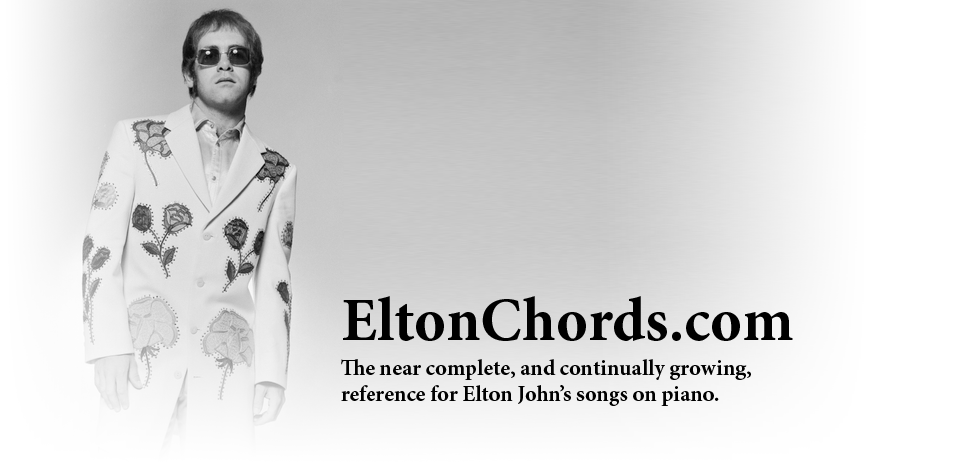
<style>
.page{position:relative;width:970px;height:475px}
.page>*{position:absolute;margin:0}
.t1{font:61.2px "MinionPro-Bold";color:#000000}
.t2{font:22.1px "MinionPro-Bold";color:#000000}
</style>
<div class="page">
<p class="t1" style="left:343px;top:296px;width:450px;height:45px">EltonChords.com</p>
<p class="t2" style="left:341px;top:359px;width:410px;height:47px">The near complete, and continually growing, <br>reference for Elton John’s songs on piano.</p>
</div>
